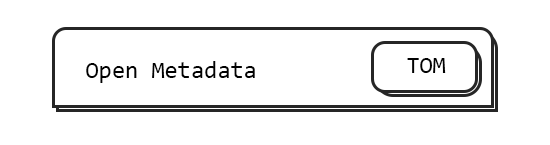
<style>
.page{position:relative;width:550px;height:145px;background:#ffffff}
.page>*{position:absolute;margin:0}
.t1{font:24px "Consolas";color:#010101}
</style>
<div class="page">
<p class="t1" style="left:86px;top:61px;width:169px;height:22px">Open Metadata</p>
<p class="t1" style="left:407px;top:58px;width:39px;height:15px">TOM</p>
</div>
